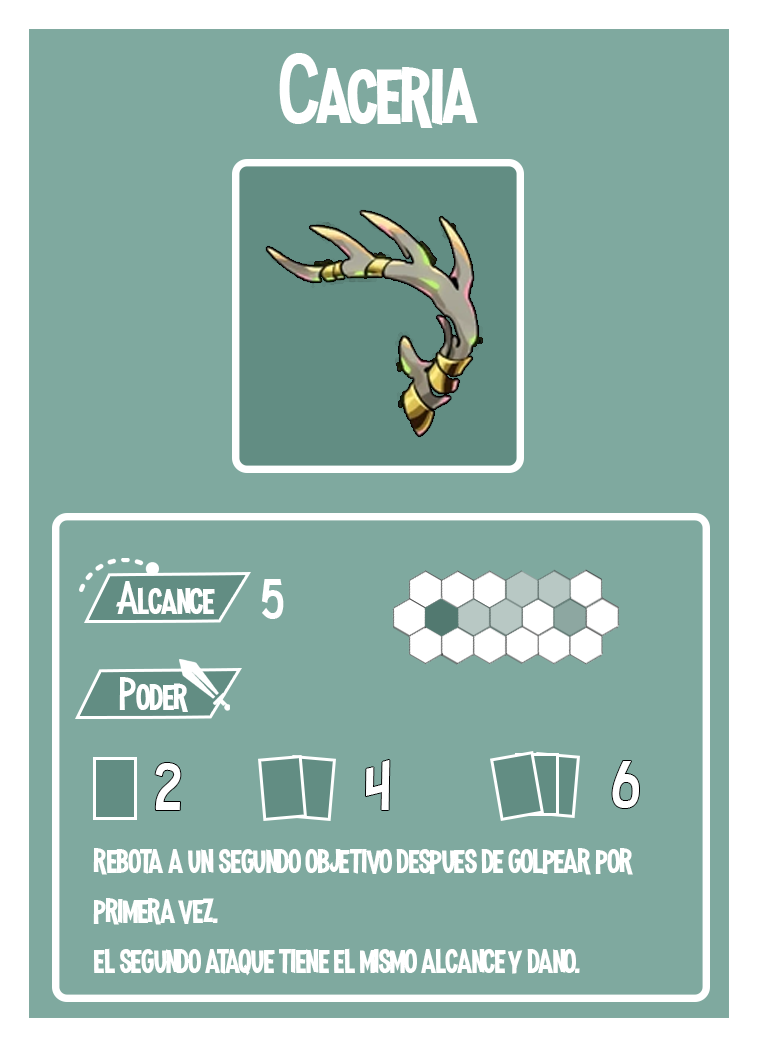
<style>
.page{position:relative;width:758px;height:1047px;background:#7fa99f}
.page>*{position:absolute;margin:0}
.t1{font:100px "MadnessHyperactive";color:#ffffff}
.t2{font:45.8px "MadnessHyperactive";color:#ffffff}
.t3{font:56.9px "MadnessHyperactive";color:#ffffff}
.t4{font:66.3px "MadnessHyperactive";color:#ffffff}
.t5{font:41.7px "MadnessHyperactive";color:#ffffff}
</style>
<div class="page">
<p class="t1" style="left:279px;top:53px;width:199px;height:75px">Caceria</p>
<p class="t2" style="left:116px;top:581px;width:99px;height:33px">Alcance</p>
<p class="t3" style="left:261px;top:579px;width:23px;height:40px">5</p>
<p class="t2" style="left:119px;top:677px;width:69px;height:35px">Poder</p>
<p class="t4" style="left:366px;top:760px;width:24px;height:50px">4</p>
<p class="t4" style="left:612px;top:761px;width:27px;height:47px">6</p>
<p class="t4" style="left:155px;top:763px;width:26px;height:47px">2</p>
<p class="t5" style="left:93px;top:848px;width:540px;height:128px">rebota a un segundo objetivo despues de golpear por primera vez. <br>el segundo ataque tiene el mismo alcance y dano.</p>
</div>
